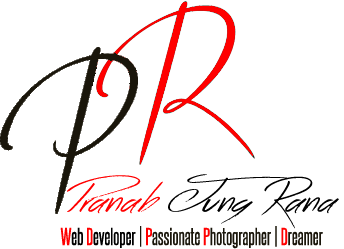
<style>
.page{position:relative;width:344px;height:249px;background:#ffffff}
.page>*{position:absolute;margin:0}
.t1{font:50px "AcrosstheRoad";color:#000000}
.t2{font:50px "AcrosstheRoad";color:#ff0000}
.t3{font:20.8px "SteelfishRg-Regular";color:#1a160b}
.t4{font:20.8px "SteelfishRg-Regular";color:#ff0000}
.t5{font:20.8px "SteelfishRg-Regular";color:#000000}
</style>
<div class="page">
<p class="t1" style="left:67px;top:174px;width:272px;height:55px"><span class="t2">Pranab </span>Jung Rana</p>
<p class="t3" style="left:60px;top:226px;width:263px;height:23px"><span class="t4">W</span><span class="t5">eb </span><span class="t4">D</span><span class="t5">eveloper</span> | <span class="t4">P</span>assionate <span class="t4">P</span>hotographer | <span class="t4">D</span>reamer</p>
</div>
